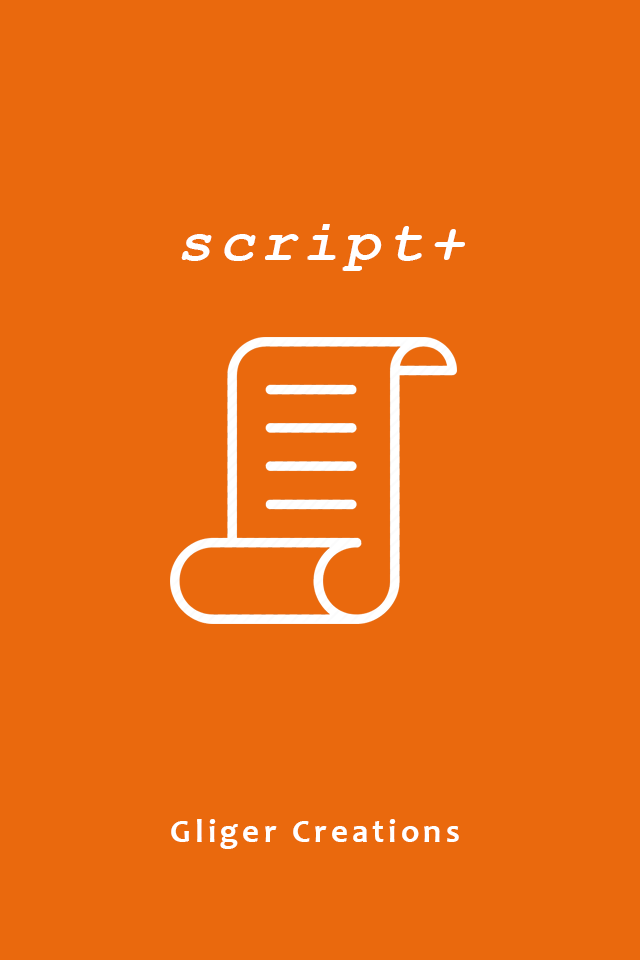
<style>
.page{position:relative;width:640px;height:960px;background:#ea690d}
.page>*{position:absolute;margin:0}
.t1{font:58.3px "CourierNewPS-BoldItalicMT";letter-spacing:0.12em;color:#ffffff}
.t2{font:33.3px "Candara-Bold";letter-spacing:0.12em;color:#ffffff}
</style>
<div class="page">
<p class="t1" style="left:181px;top:224px;width:284px;height:47px">script+</p>
<p class="t2" style="left:171px;top:819px;width:288px;height:30px">Gliger Creations</p>
</div>
